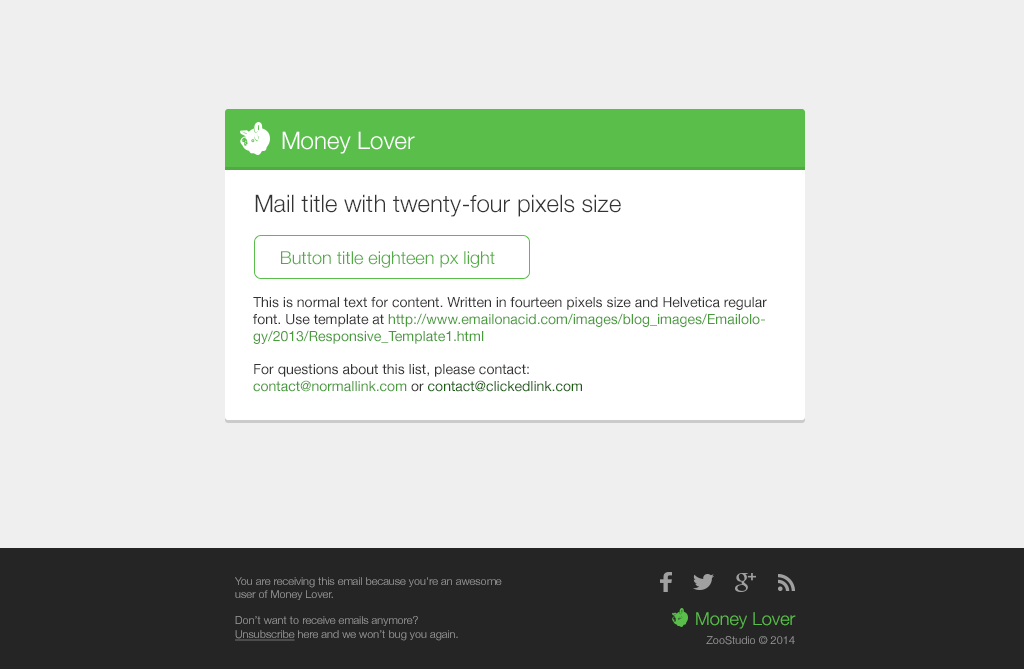
<style>
.page{position:relative;width:1024px;height:669px;background:#efefef}
.page>*{position:absolute;margin:0}
.t1{font:24px "HelveticaNeue-Light";color:#ffffff}
.t2{font:24px "HelveticaNeue-Light";color:#333333}
.t3{font:18px "HelveticaNeue-Light";color:#50ac42}
.t4{font:14px "HelveticaNeue";color:#333333}
.t5{font:14px "HelveticaNeue";color:#479b3b}
.t6{font:14px "HelveticaNeue";color:#175d0c}
.t7{font:11px "HelveticaNeue-Light";color:#999999}
.t8{font:11px "HelveticaNeue-Light";color:#999999;text-decoration:underline}
.t9{font:18px "HelveticaNeue-Light";color:#59bf4a}
</style>
<div class="page">
<p class="t1" style="left:282px;top:131px;width:133px;height:23px">Money Lover</p>
<p class="t2" style="left:255px;top:194px;width:366px;height:23px">Mail title with twenty-four pixels size</p>
<p class="t3" style="left:281px;top:251px;width:214px;height:17px">Button title eighteen px light</p>
<p class="t4" style="left:253px;top:297px;width:514px;height:95px">This is normal text for content. Written in fourteen pixels size and Helvetica regular font. Use template at <span class="t5">http://www.emailonacid.com/images/blog_images/Emailology/2013/Responsive_Template1.html<br></span><br>For questions about this list, please contact: <br><span class="t5">contact@normallink.com</span> or <span class="t6">contact@clickedlink.com</span></p>
<p class="t7" style="left:235px;top:577px;width:267px;height:64px">You are receiving this email because you're an awesome user of Money Lover.<br><br>Don’t want to receive emails anymore? <br><span class="t8">Unsubscribe</span> here and we won’t bug you again.</p>
<p class="t9" style="left:696px;top:612px;width:100px;height:17px">Money Lover</p>
<p class="t7" style="left:706px;top:636px;width:89px;height:9px">ZooStudio © 2014</p>
</div>
